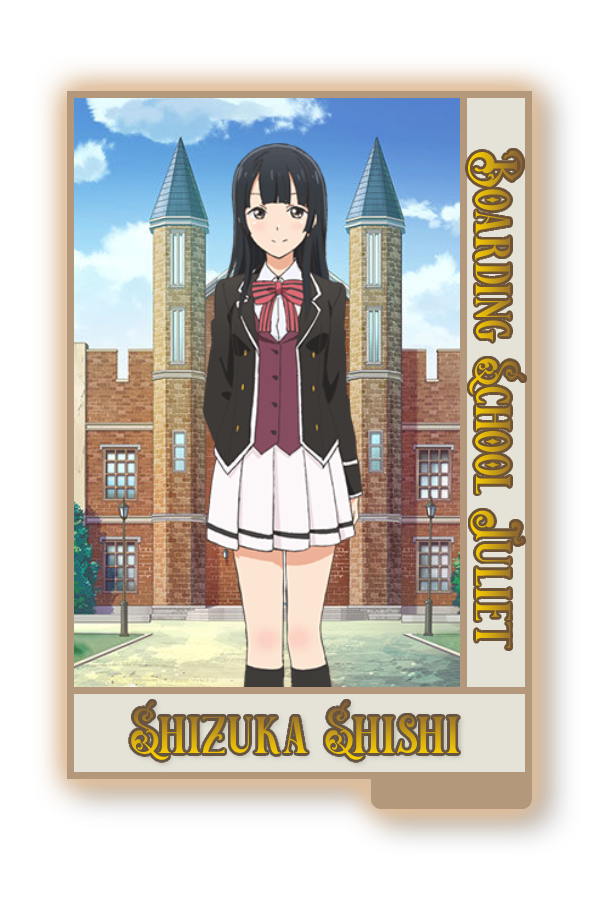
<style>
.page{position:relative;width:600px;height:900px;background:#ffffff}
.page>*{position:absolute;margin:0}
.t1{font:58.9px "VictorianDecadeDemoVersion"}
.t2{font:62.3px "VictorianDecadeDemoVersion"}
</style>
<div class="page">
<p class="t1" style="left:468px;top:150px;width:57px;height:498px;rotate:90deg">Boarding School Juliet</p>
<p class="t2" style="left:130px;top:701px;width:330px;height:59px">Shizuka Shishi</p>
</div>
